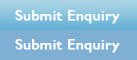
<style>
.page{position:relative;width:137px;height:60px;background:#7fafd3}
.page>*{position:absolute;margin:0}
.t1{font:13.6px "GillSansMT";color:#ffffff;font-weight:bold;scale:1.18 1}
</style>
<div class="page">
<p class="t1" style="left:15px;top:10px;width:105px;height:14px">Submit Enquiry</p>
<p class="t1" style="left:15px;top:39px;width:105px;height:14px">Submit Enquiry</p>
</div>
